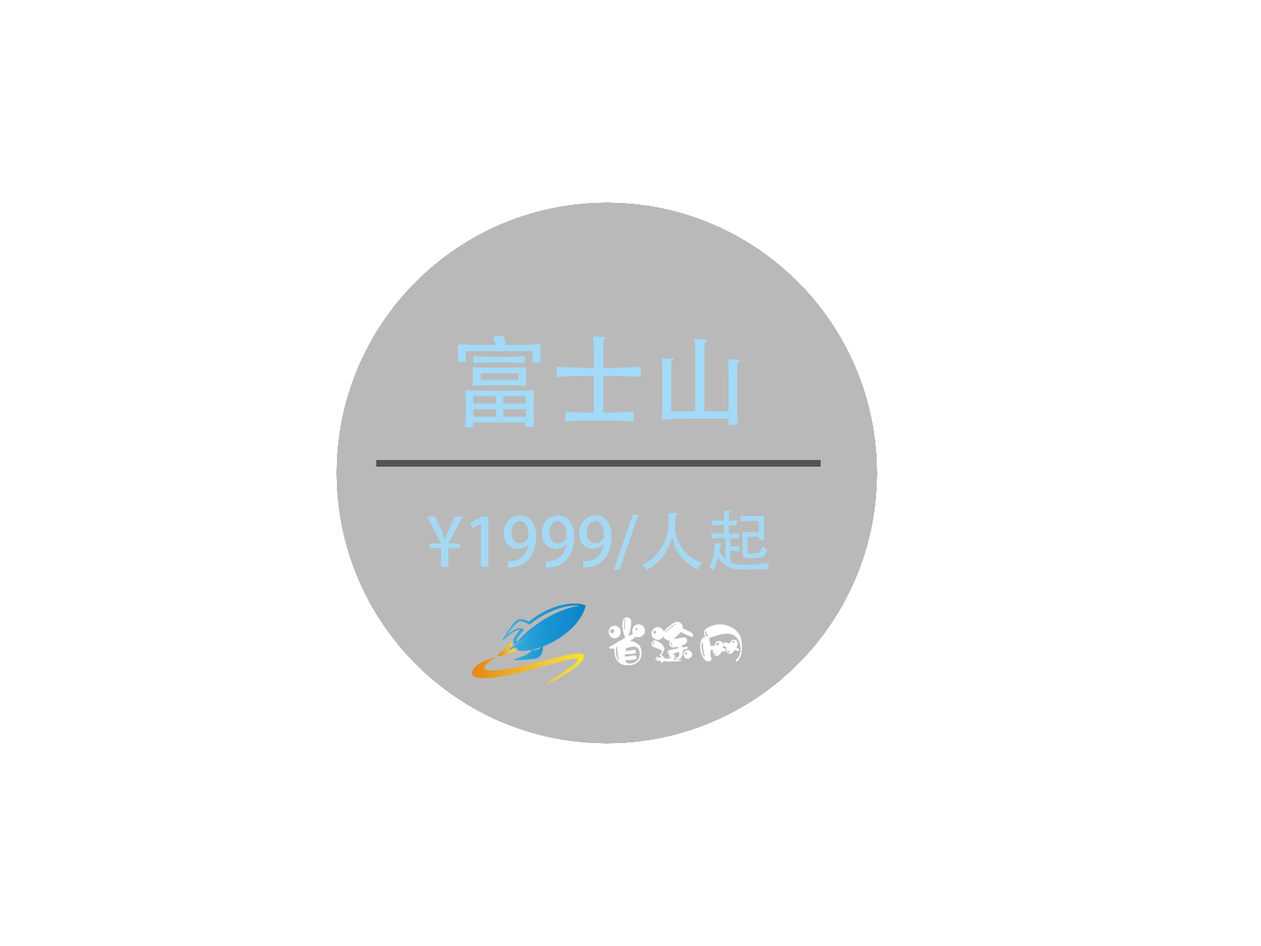
<style>
.page{position:relative;width:1261px;height:946px;background:#ffffff}
.page>*{position:absolute;margin:0}
.t1{font:100.1px "AdobeHeitiStd-Regular";color:#a3daf7}
.t2{font:66.7px "AdobeHeitiStd-Regular";color:#a3daf7}
</style>
<div class="page">
<p class="t1" style="left:458px;top:335px;width:283px;height:92px">富士山</p>
<p class="t2" style="left:427px;top:510px;width:342px;height:61px;opacity:0.93">¥1999/人起</p>
</div>
